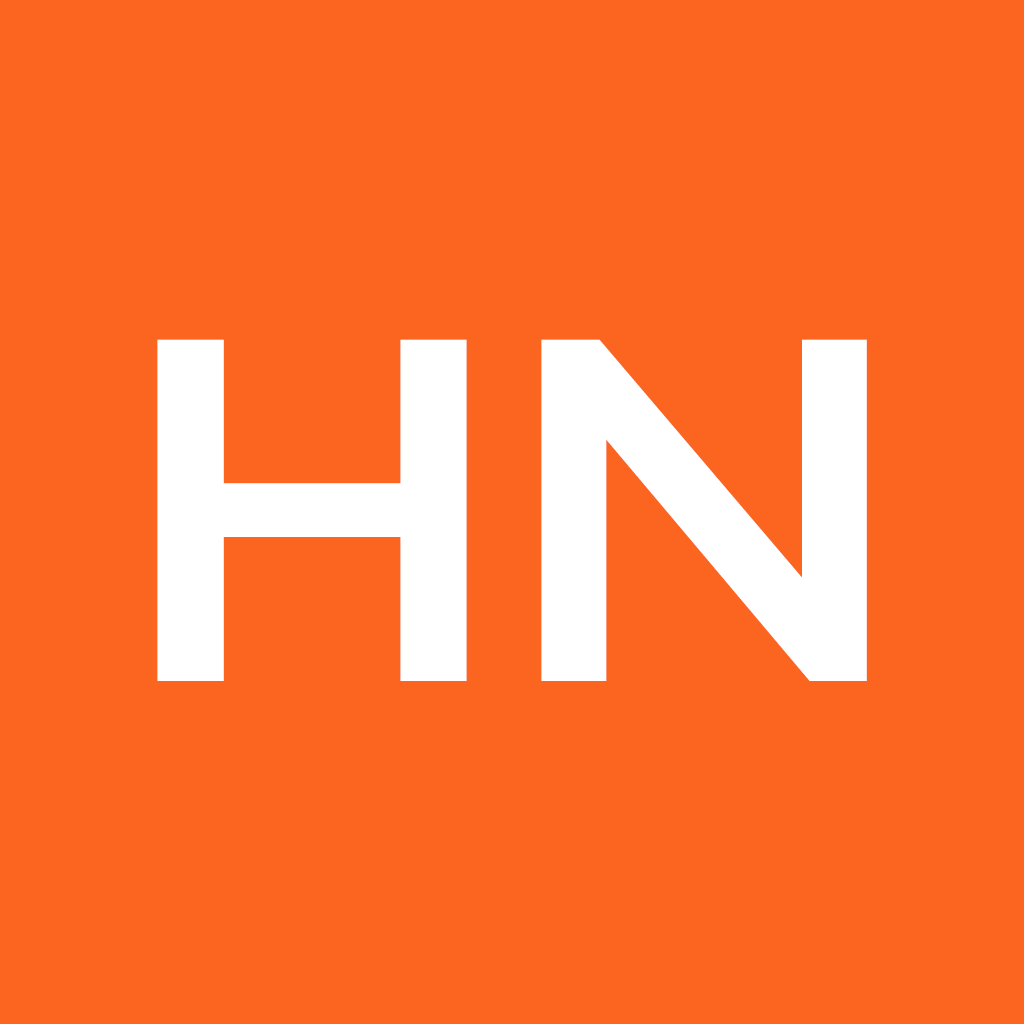
<style>
.page{position:relative;width:1024px;height:1024px;background:#fb651f}
.page>*{position:absolute;margin:0}
.t1{font:500px "GillSans-SemiBold";color:#ffffff}
</style>
<div class="page">
<p class="t1" style="left:157px;top:339px;width:710px;height:342px">HN</p>
</div>
